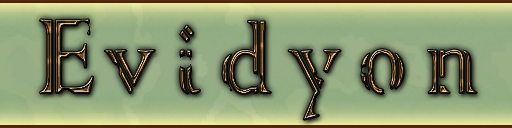
<style>
.page{position:relative;width:512px;height:128px}
.page>*{position:absolute;margin:0}
.t1{font:120px "ColonnaMT";letter-spacing:0.2em;scale:0.8 1}
.t2{font:140px "ColonnaMT";letter-spacing:0.075em;scale:0.8 1}
</style>
<div class="page">
<p class="t1" style="left:40px;top:19px;width:437px;height:101px"><span class="t2">E</span>vidyon</p>
</div>
